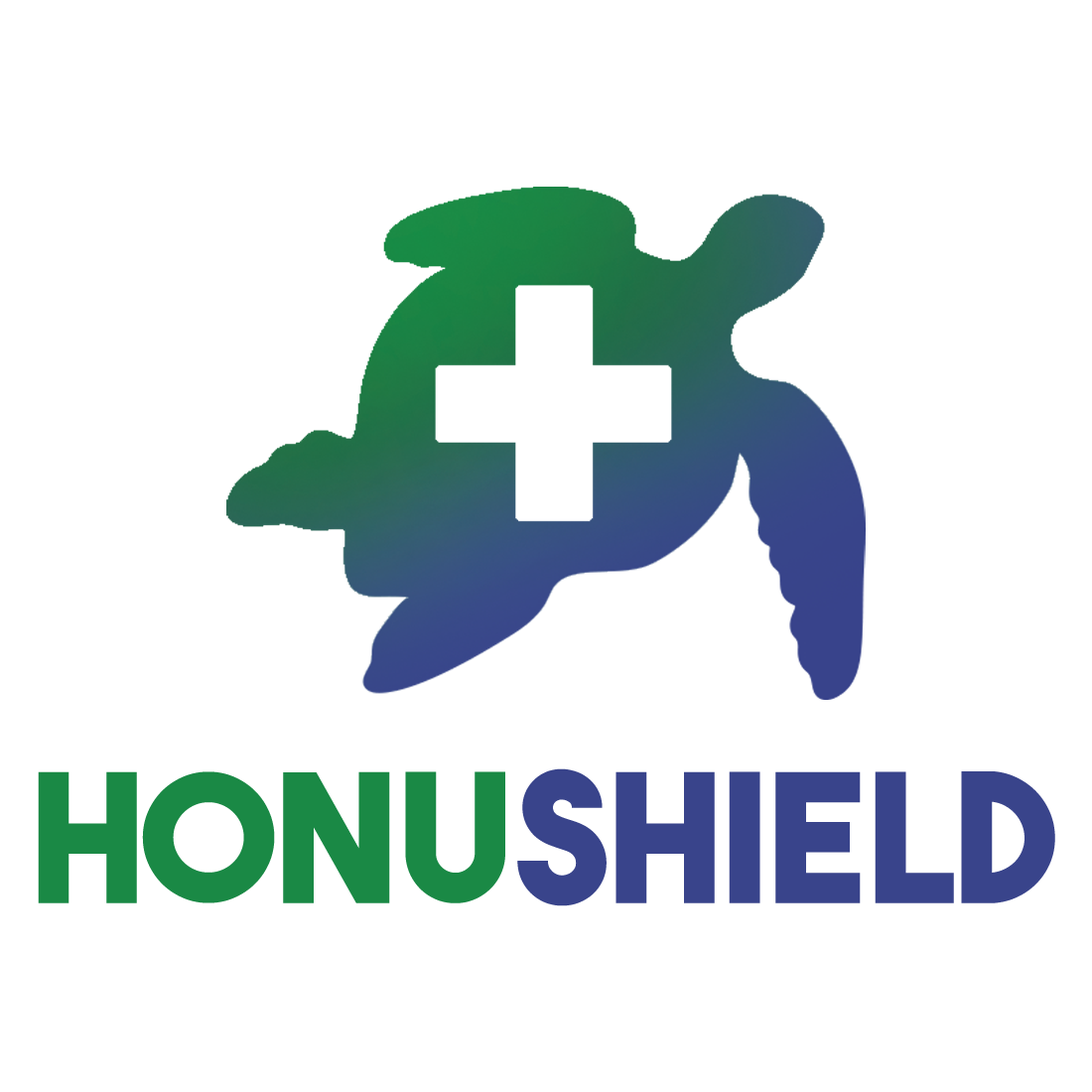
<style>
.page{position:relative;width:1092px;height:1092px;background:#ffffff}
.page>*{position:absolute;margin:0}
.t1{font:178.7px "TheBoldFont";color:#39448b}
.t2{font:178.7px "TheBoldFont";color:#1a8945}
</style>
<div class="page">
<p class="t1" style="left:38px;top:768px;width:1017px;height:138px"><span class="t2">Honu</span>Shield</p>
</div>
